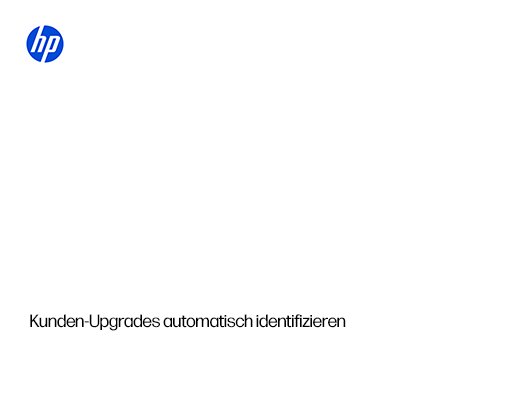
<style>
.page{position:relative;width:510px;height:400px;background:#ffffff}
.page>*{position:absolute;margin:0}
.t1{font:18px "FormaDJRDisplay-Regular";color:#000000}
</style>
<div class="page">
<p class="t1" style="left:30px;top:314px;width:316px;height:17px">Kunden-Upgrades automatisch identifizieren</p>
</div>
